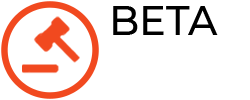
<style>
.page{position:relative;width:250px;height:100px;background:#ffffff}
.page>*{position:absolute;margin:0}
.t1{font:40px "Montserrat-Medium";color:#000000}
</style>
<div class="page">
<p class="t1" style="left:113px;top:6px;width:105px;height:29px">BETA</p>
</div>
